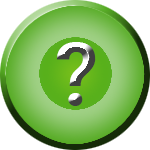
<style>
.page{position:relative;width:150px;height:150px;background:#ffffff}
.page>*{position:absolute;margin:0}
.t1{font:86.5px "Roboto-Bold"}
</style>
<div class="page">
<p class="t1" style="left:56px;top:42px;width:40px;height:64px">?</p>
</div>
